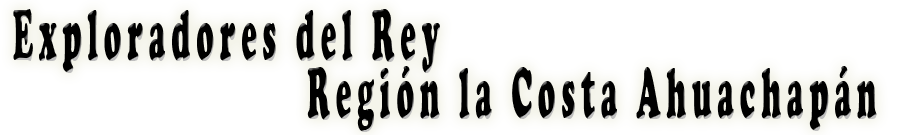
<style>
.page{position:relative;width:920px;height:135px;background:#ffffff}
.page>*{position:absolute;margin:0}
.t1{font:75px/58.5px "CooperBlack";letter-spacing:0.22em;color:#000000;scale:0.38 1}
</style>
<div class="page">
<p class="t1" style="left:13px;top:9px;width:864px;height:123px">Exploradores del Rey<br>                      Región la Costa Ahuachapán</p>
</div>
